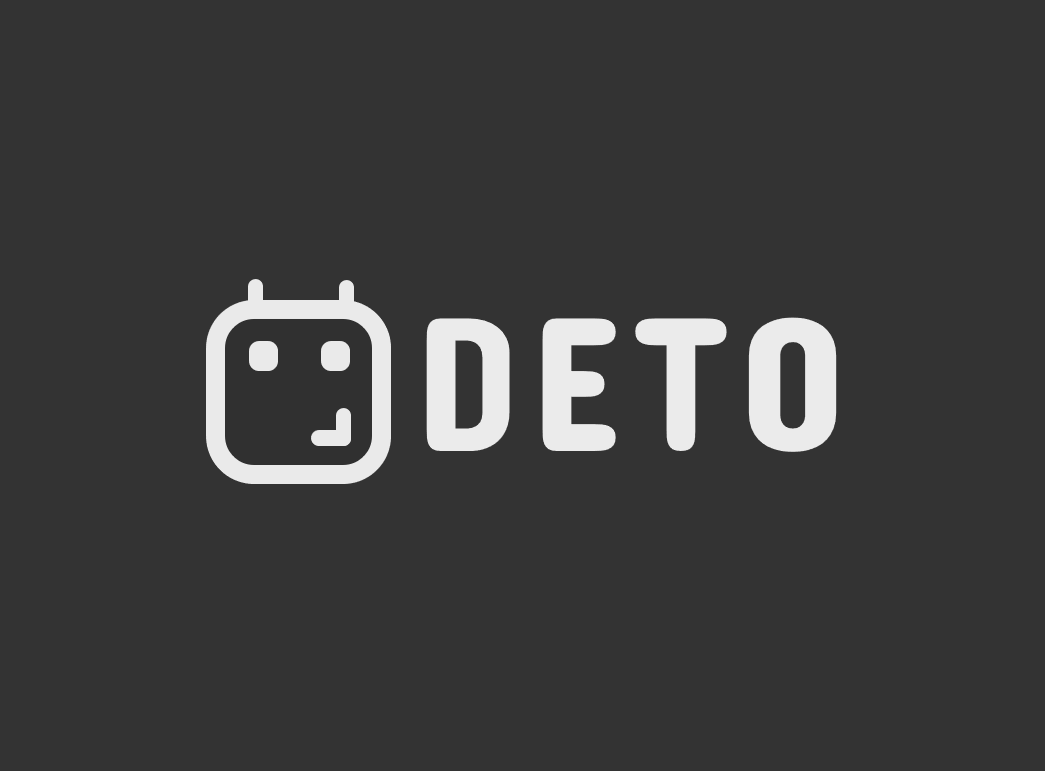
<style>
.page{position:relative;width:1045px;height:771px;background:#333333}
.page>*{position:absolute;margin:0}
.t1{font:194px "ConcertOne-Regular";letter-spacing:0.06em;color:#ebebeb}
</style>
<div class="page">
<p class="t1" style="left:426px;top:317px;width:411px;height:135px">DETO</p>
</div>
